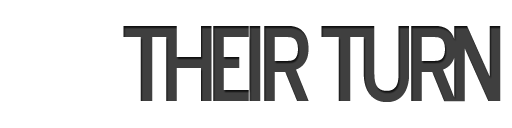
<style>
.page{position:relative;width:512px;height:128px;background:#ffffff}
.page>*{position:absolute;margin:0}
.t1{font:104px "BlueHighwayD-Regular";letter-spacing:-0.1em;color:#444444}
.t2{font:104px "BlueHighwayD-Regular";letter-spacing:-0.075em;color:#444444}
.t3{font:104px "BlueHighwayD-Regular";letter-spacing:-0.085em;color:#444444}
</style>
<div class="page">
<p class="t1" style="left:123px;top:26px;width:378px;height:76px">Th<span class="t2">e</span><span class="t3">i</span>r Turn</p>
</div>
